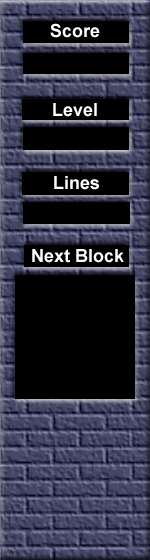
<style>
.page{position:relative;width:150px;height:560px;background:#000000}
.page>*{position:absolute;margin:0}
.t1{font:18px "Arial-BoldMT";color:#ffffff}
</style>
<div class="page">
<p class="t1" style="left:50px;top:23px;width:50px;height:15px">Score</p>
<p class="t1" style="left:53px;top:103px;width:44px;height:14px">Level</p>
<p class="t1" style="left:54px;top:176px;width:45px;height:14px">Lines</p>
<p class="t1" style="left:32px;top:249px;width:92px;height:14px">Next Block</p>
</div>
